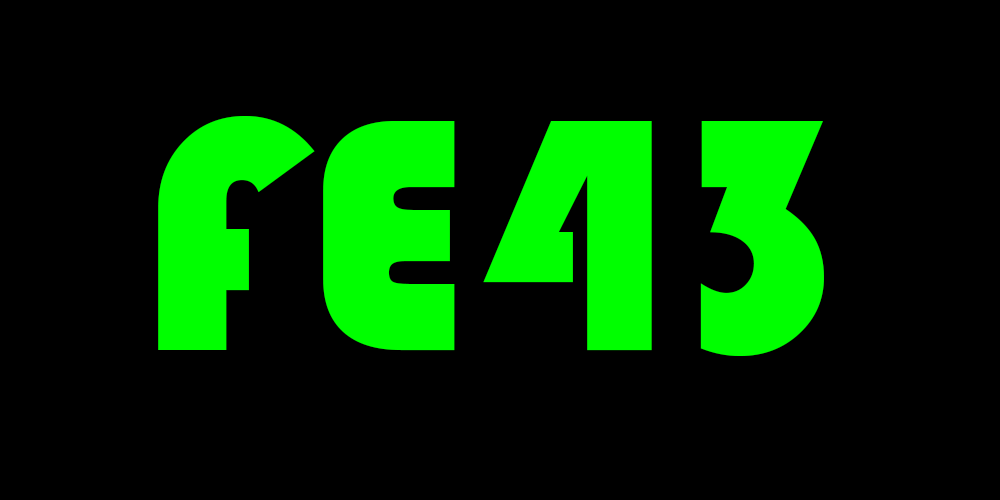
<style>
.page{position:relative;width:1000px;height:500px;background:#000000}
.page>*{position:absolute;margin:0}
.t1{font:342.7px "Bauhaus93";color:#00ff00}
</style>
<div class="page">
<p class="t1" style="left:158px;top:116px;width:666px;height:240px">FE43</p>
</div>
